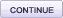
<style>
.page{position:relative;width:63px;height:18px}
.page>*{position:absolute;margin:0}
.t1{font:8px "ArialMT";color:#2f2d45;scale:1.05 1}
</style>
<div class="page">
<p class="t1" style="left:10px;top:7px;width:44px;height:7px">CONTINUE</p>
</div>
